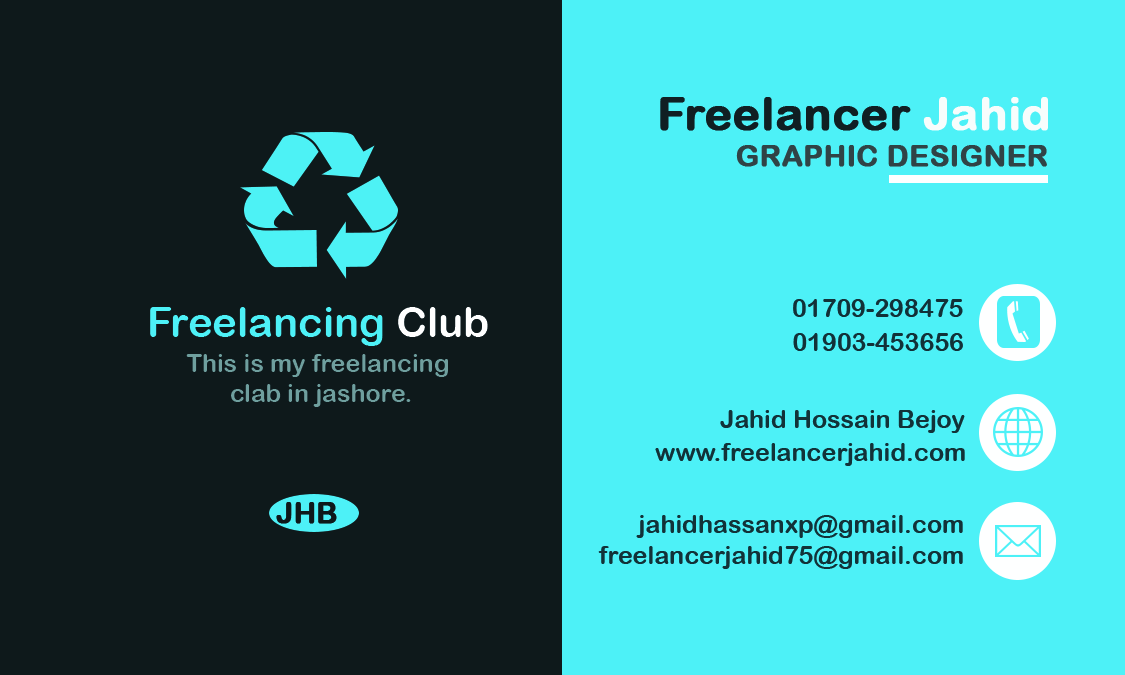
<style>
.page{position:relative;width:1125px;height:675px;background:#0e191b}
.page>*{position:absolute;margin:0}
.t1{font:45.8px "ArialRoundedMTBold";color:#101f23;font-weight:bold}
.t2{font:45.8px "ArialRoundedMTBold";color:#f7fdfc;font-weight:bold}
.t3{font:29.2px "ArialRoundedMTBold";color:#304346;font-weight:bold}
.t4{font:25px "ArialRoundedMTBold";color:#123138;text-transform:uppercase}
.t5{font:41.7px "ArialRoundedMTBold";color:#4df1f7}
.t6{font:41.7px "ArialRoundedMTBold";color:#ffffff}
.t7{font:25px "ArialRoundedMTBold";color:#6e9e9d}
.t8{font:25px "ArialRoundedMTBold";color:#123138}
.t9{font:29.2px "ArialRoundedMTBold";color:#0e191b;text-transform:uppercase;font-weight:bold}
</style>
<div class="page">
<p class="t1" style="left:660px;top:97px;width:388px;height:34px">Freelancer <span class="t2">Jahid</span></p>
<p class="t3" style="left:736px;top:145px;width:311px;height:22px">GRAPHIC DESIGNER</p>
<p class="t4" style="left:793px;top:299px;width:170px;height:18px">01709-298475</p>
<p class="t5" style="left:150px;top:307px;width:338px;height:39px">Freelancing <span class="t6">Club</span></p>
<p class="t4" style="left:793px;top:333px;width:170px;height:18px">01903-453656</p>
<p class="t7" style="left:186px;top:354px;width:262px;height:53px;text-align:center">This is my freelancing<br> clab in jashore.</p>
<p class="t8" style="left:720px;top:410px;width:245px;height:23px">Jahid Hossain Bejoy</p>
<p class="t8" style="left:655px;top:443px;width:310px;height:23px">www.freelancerjahid.com</p>
<p class="t9" style="left:276px;top:502px;width:61px;height:22px">JHB</p>
<p class="t8" style="left:636px;top:515px;width:327px;height:23px">jahidhassanxp@gmail.com</p>
<p class="t8" style="left:598px;top:546px;width:365px;height:23px">freelancerjahid75@gmail.com</p>
</div>
